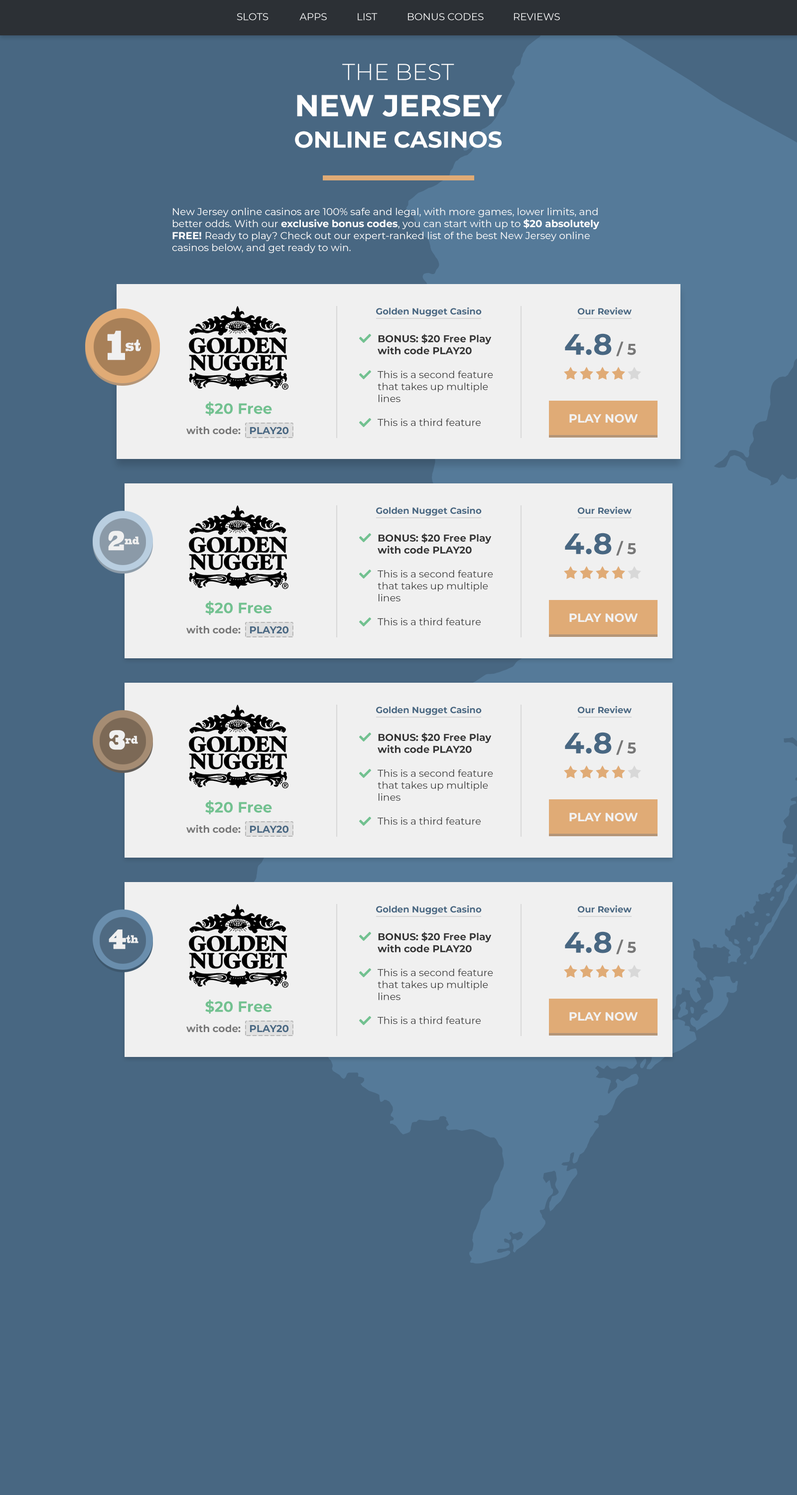
<style>
.page{position:relative;width:797px;height:1495px;background:#486782}
.page>*{position:absolute;margin:0}
.t1{font:22.9px/31.4px "Montserrat-Bold";color:#ffffff}
.t2{font:22.9px "Montserrat-Light";color:#ffffff}
.t3{font:30.3px "Montserrat-Bold";color:#ffffff}
.t4{font:10px "Montserrat-Regular";color:#ffffff}
.t5{font:10px "Montserrat-Bold";color:#ffffff}
.t6{font:9px "Montserrat-Bold";color:#486782}
.t7{font:26.7px "BlackoakStd";color:#f0f0f0;scale:0.46 1}
.t8{font:39px "BlackoakStd";color:#f0f0f0;scale:0.46 1}
.t9{font:10px "Montserrat-Regular";color:#333333}
.t10{font:10px "Montserrat-Bold";color:#333333}
.t11{font:29.4px "Montserrat-Bold";color:#486782}
.t12{font:15.5px "Montserrat-Bold";color:#777777}
.t13{font:15px "Montserrat-Bold";color:#72c190}
.t14{font:12px "Montserrat-Bold";color:#f2f2f2}
.t15{font:10px "Montserrat-Bold";color:#777777}
.t16{font:10px "Montserrat-Bold";color:#486782}
.t17{font:17.7px "BlackoakStd";color:#f0f0f0;scale:0.46 1}
.t18{font:25.9px "BlackoakStd";color:#f0f0f0;scale:0.46 1}
</style>
<div class="page">
<p class="t1" style="left:295px;top:64px;width:207px;height:84px;text-align:center"><span class="t2">THE BEST<br></span><span class="t3">NEW JERSEY<br></span>ONLINE CASINOS</p>
<p class="t4" style="left:172px;top:208px;width:428px;height:45px">New Jersey online casinos are 100% safe and legal, with more games, lower limits, and better odds. With our <span class="t5">exclusive bonus codes</span>, you can start with up to <span class="t5">$20 absolutely FREE! </span>Ready to play? Check out our expert-ranked list of the best New Jersey online casinos below, and get ready to win.</p>
<p class="t6" style="left:376px;top:307px;width:106px;height:9px">Golden Nugget Casino</p>
<p class="t6" style="left:578px;top:307px;width:54px;height:8px">Our Review</p>
<p class="t7" style="left:107px;top:330px;width:34px;height:30px"><span class="t8">1</span>st</p>
<p class="t9" style="left:378px;top:334px;width:115px;height:92px"><span class="t10">BONUS: $20 Free Play with code PLAY20<br></span><br>This is a second feature that takes up multiple lines<br><br>This is a third feature</p>
<p class="t11" style="left:565px;top:333px;width:71px;height:23px">4.8<span class="t12"> / 5</span></p>
<p class="t13" style="left:205px;top:402px;width:67px;height:14px">$20 Free</p>
<p class="t14" style="left:570px;top:414px;width:68px;height:9px">PLAY NOW</p>
<p class="t15" style="left:186px;top:426px;width:103px;height:9px">with code:   <span class="t16">PLAY20</span></p>
<p class="t6" style="left:376px;top:506px;width:106px;height:10px">Golden Nugget Casino</p>
<p class="t6" style="left:578px;top:506px;width:54px;height:8px">Our Review</p>
<p class="t17" style="left:108px;top:531px;width:32px;height:20px"><span class="t18">2</span>nd</p>
<p class="t9" style="left:378px;top:533px;width:115px;height:93px"><span class="t10">BONUS: $20 Free Play with code PLAY20<br></span><br>This is a second feature that takes up multiple lines<br><br>This is a third feature</p>
<p class="t11" style="left:565px;top:533px;width:71px;height:23px">4.8<span class="t12"> / 5</span></p>
<p class="t13" style="left:205px;top:601px;width:67px;height:14px">$20 Free</p>
<p class="t14" style="left:570px;top:614px;width:68px;height:9px">PLAY NOW</p>
<p class="t15" style="left:186px;top:626px;width:103px;height:8px">with code:   <span class="t16">PLAY20</span></p>
<p class="t6" style="left:376px;top:706px;width:106px;height:9px">Golden Nugget Casino</p>
<p class="t6" style="left:578px;top:706px;width:54px;height:8px">Our Review</p>
<p class="t17" style="left:109px;top:730px;width:29px;height:20px"><span class="t18">3</span>rd</p>
<p class="t9" style="left:378px;top:733px;width:115px;height:92px"><span class="t10">BONUS: $20 Free Play with code PLAY20<br></span><br>This is a second feature that takes up multiple lines<br><br>This is a third feature</p>
<p class="t11" style="left:565px;top:732px;width:71px;height:23px">4.8<span class="t12"> / 5</span></p>
<p class="t13" style="left:205px;top:800px;width:67px;height:14px">$20 Free</p>
<p class="t14" style="left:570px;top:813px;width:68px;height:9px">PLAY NOW</p>
<p class="t15" style="left:186px;top:825px;width:103px;height:8px">with code:   <span class="t16">PLAY20</span></p>
<p class="t6" style="left:376px;top:905px;width:106px;height:10px">Golden Nugget Casino</p>
<p class="t6" style="left:578px;top:905px;width:54px;height:8px">Our Review</p>
<p class="t17" style="left:109px;top:930px;width:30px;height:19px"><span class="t18">4</span>th</p>
<p class="t9" style="left:378px;top:932px;width:115px;height:92px"><span class="t10">BONUS: $20 Free Play with code PLAY20<br></span><br>This is a second feature that takes up multiple lines<br><br>This is a third feature</p>
<p class="t11" style="left:565px;top:932px;width:71px;height:22px">4.8<span class="t12"> / 5</span></p>
<p class="t13" style="left:205px;top:1000px;width:67px;height:14px">$20 Free</p>
<p class="t14" style="left:570px;top:1012px;width:68px;height:9px">PLAY NOW</p>
<p class="t15" style="left:186px;top:1024px;width:103px;height:9px">with code:   <span class="t16">PLAY20</span></p>
</div>
